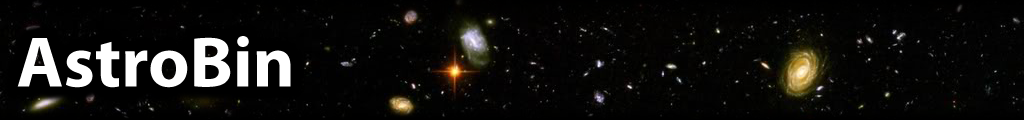
<style>
.page{position:relative;width:1024px;height:120px}
.page>*{position:absolute;margin:0}
.t1{font:72px "MyriadPro-Bold";color:#ffffff}
</style>
<div class="page">
<p class="t1" style="left:17px;top:36px;width:274px;height:52px">AstroBin</p>
</div>
